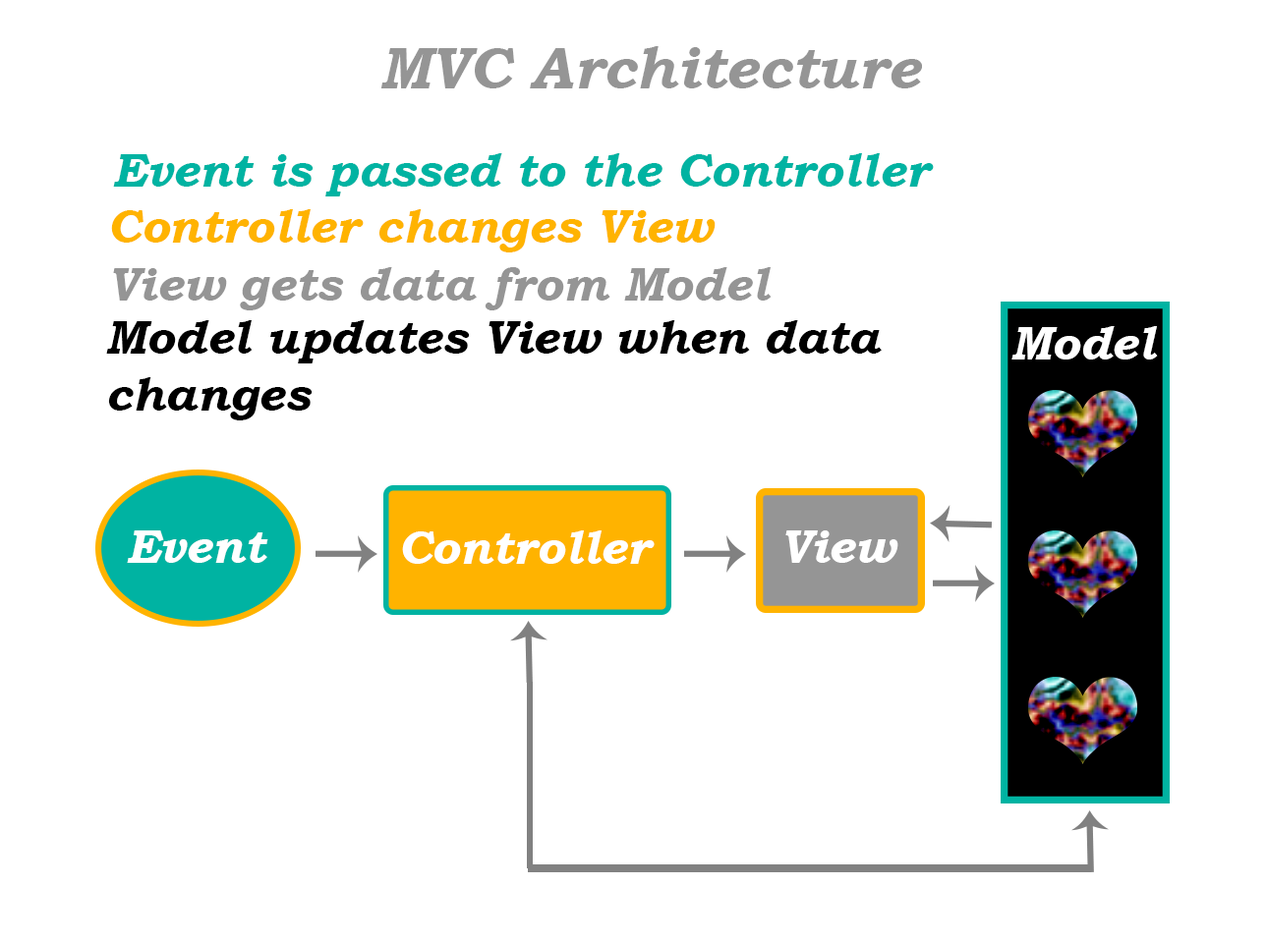
<style>
.page{position:relative;width:1267px;height:941px;background:#ffffff}
.page>*{position:absolute;margin:0}
.t1{font:59px "BookmanOldStyle-BoldItalic";color:#959595}
.t2{font:47.2px "BookmanOldStyle-BoldItalic";color:#00b3a2}
.t3{font:47.2px "BookmanOldStyle-BoldItalic";color:#ffb300}
.t4{font:47.2px "BookmanOldStyle-BoldItalic";color:#959595}
.t5{font:47.2px "BookmanOldStyle-BoldItalic";color:#000000}
.t6{font:47.2px "BookmanOldStyle-BoldItalic";color:#ffffff}
</style>
<div class="page">
<p class="t1" style="left:380px;top:46px;width:542px;height:42px">MVC Architecture</p>
<p class="t2" style="left:113px;top:153px;width:821px;height:44px">Event is passed to the Controller</p>
<p class="t3" style="left:111px;top:209px;width:604px;height:44px">Controller changes View</p>
<p class="t4" style="left:113px;top:267px;width:658px;height:44px">View gets data from Model</p>
<p class="t5" style="left:106px;top:320px;width:775px;height:101px">Model updates View when data<br>changes</p>
<p class="t6" style="left:1011px;top:326px;width:147px;height:34px">Model</p>
<p class="t6" style="left:127px;top:531px;width:141px;height:32px">Event</p>
<p class="t6" style="left:402px;top:531px;width:252px;height:33px">Controller</p>
<p class="t6" style="left:785px;top:531px;width:113px;height:32px">View</p>
</div>
